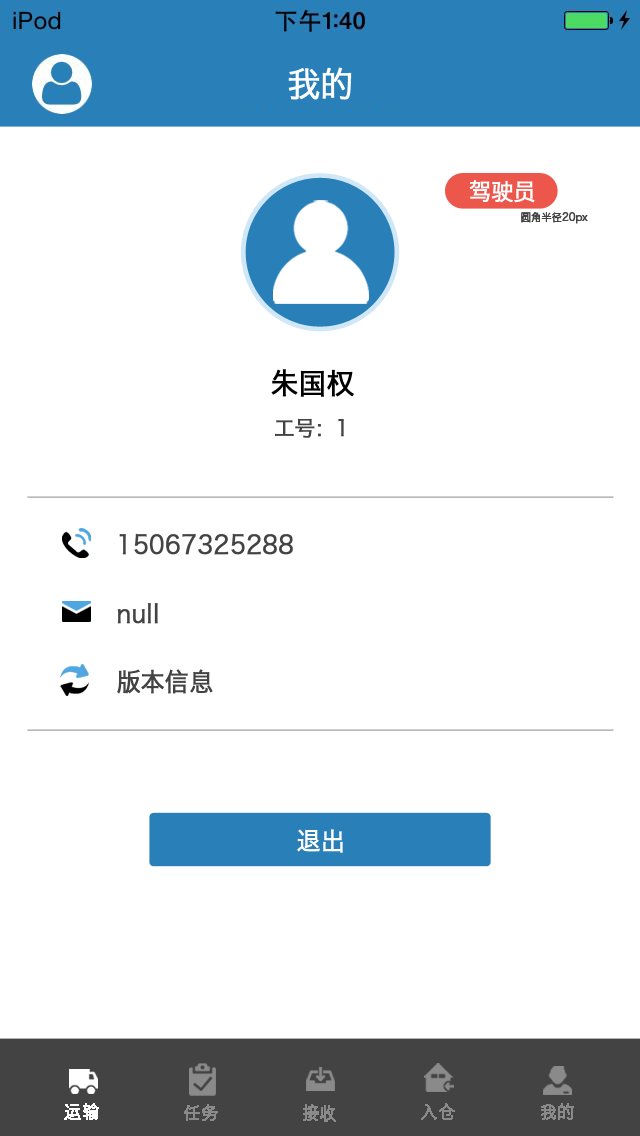
<style>
.page{position:relative;width:640px;height:1136px;background:#ffffff}
.page>*{position:absolute;margin:0}
.t1{font:34.9px "HiraginoSansGB-W3";color:#fefefe;font-weight:bold;scale:0.94 1}
.t2{font:23.3px "HiraginoSansGB-W3";color:#ffffff;font-weight:bold;scale:0.94 1}
.t3{font:10.7px "HiraginoSansGB-W3";color:#434343;font-weight:bold;scale:0.94 1}
.t4{font:29.1px "HiraginoSansGB-W3";color:#000000;font-weight:bold;scale:0.94 1}
.t5{font:21.3px "HiraginoSansGB-W3";color:#434343;font-weight:bold;scale:0.94 1}
.t6{font:25.2px "HiraginoSansGB-W3";color:#434343;font-weight:bold;scale:0.94 1}
.t7{font:25.2px "HiraginoSansGB-W3";color:#ffffff;font-weight:bold;scale:0.94 1}
.t8{font:17.5px "HiraginoSansGB-W3";color:#ffffff;font-weight:bold;scale:0.94 1}
.t9{font:17.5px "HiraginoSansGB-W3";color:#8a8a8a;font-weight:bold;scale:0.94 1}
</style>
<div class="page">
<p class="t1" style="left:288px;top:67px;width:64px;height:33px">我的</p>
<p class="t2" style="left:469px;top:180px;width:66px;height:23px">驾驶员</p>
<p class="t3" style="left:521px;top:211px;width:67px;height:13px">圆角半径20px</p>
<p class="t4" style="left:271px;top:369px;width:83px;height:28px">朱国权</p>
<p class="t5" style="left:275px;top:418px;width:69px;height:20px">工号：1</p>
<p class="t6" style="left:119px;top:533px;width:174px;height:22px">15067325288</p>
<p class="t6" style="left:117px;top:603px;width:41px;height:21px">null</p>
<p class="t6" style="left:117px;top:669px;width:96px;height:25px">版本信息</p>
<p class="t7" style="left:297px;top:829px;width:46px;height:24px">退出</p>
<p class="t8" style="left:64px;top:1103px;width:35px;height:17px">运输</p>
<p class="t9" style="left:184px;top:1104px;width:34px;height:17px">任务</p>
<p class="t9" style="left:303px;top:1104px;width:33px;height:18px">接收</p>
<p class="t9" style="left:421px;top:1103px;width:34px;height:17px">入仓</p>
<p class="t9" style="left:541px;top:1103px;width:33px;height:17px">我的</p>
</div>
